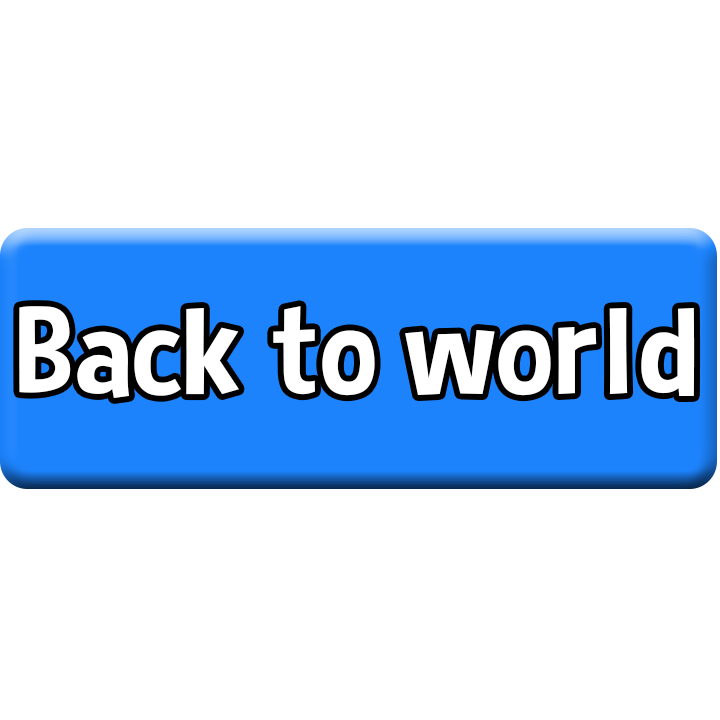
<style>
.page{position:relative;width:720px;height:720px;background:#ffffff}
.page>*{position:absolute;margin:0}
.t1{font:124.4px "CurseCasualRegular";color:#ffffff;scale:1.12 1}
</style>
<div class="page">
<p class="t1" style="left:19px;top:306px;width:676px;height:92px">Back to world</p>
</div>
